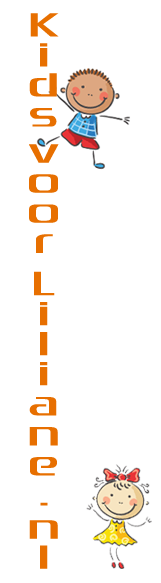
<style>
.page{position:relative;width:161px;height:583px;background:#ffffff}
.page>*{position:absolute;margin:0}
.t1{font:33.9px/40.1px "Zrnic";letter-spacing:-0.135em;color:#e76f00;scale:2.08 1}
</style>
<div class="page">
<p class="t1" style="left:29px;top:13px;width:30px;height:556px">Kids  voor    Liliane. nl</p>
</div>
